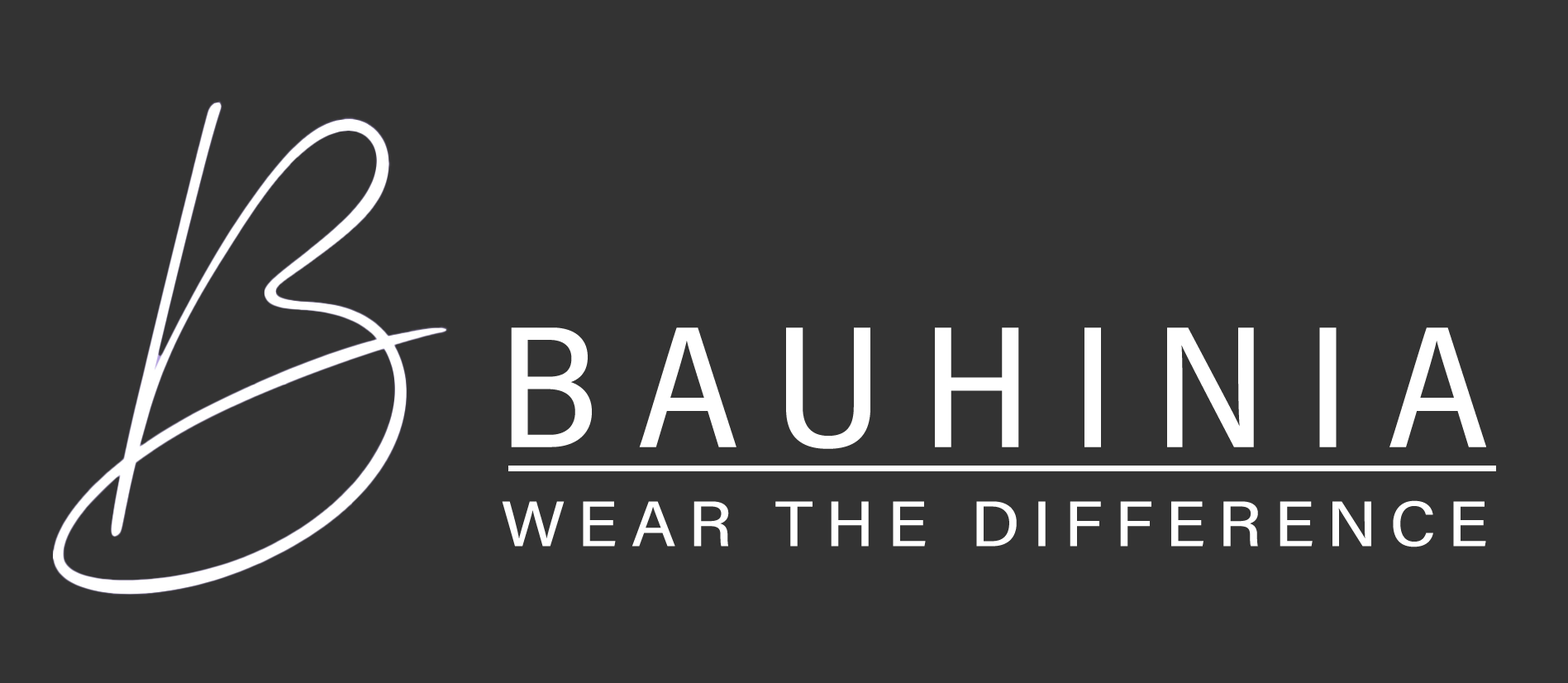
<style>
.page{position:relative;width:1568px;height:683px;background:#333333}
.page>*{position:absolute;margin:0}
.t1{font:174px "AcuminConcept_457.000wght_80.000wdth";letter-spacing:0.195em;color:#ffffff;scale:1.09 1}
.t2{font:64.5px "AcuminConcept_457.000wght_89.000wdth";letter-spacing:0.16em;color:#ffffff;scale:1.17 1}
</style>
<div class="page">
<p class="t1" style="left:511px;top:327px;width:975px;height:122px">BAUHINIA</p>
<p class="t2" style="left:502px;top:500px;width:984px;height:47px">WEAR THE DIFFERENCE</p>
</div>
